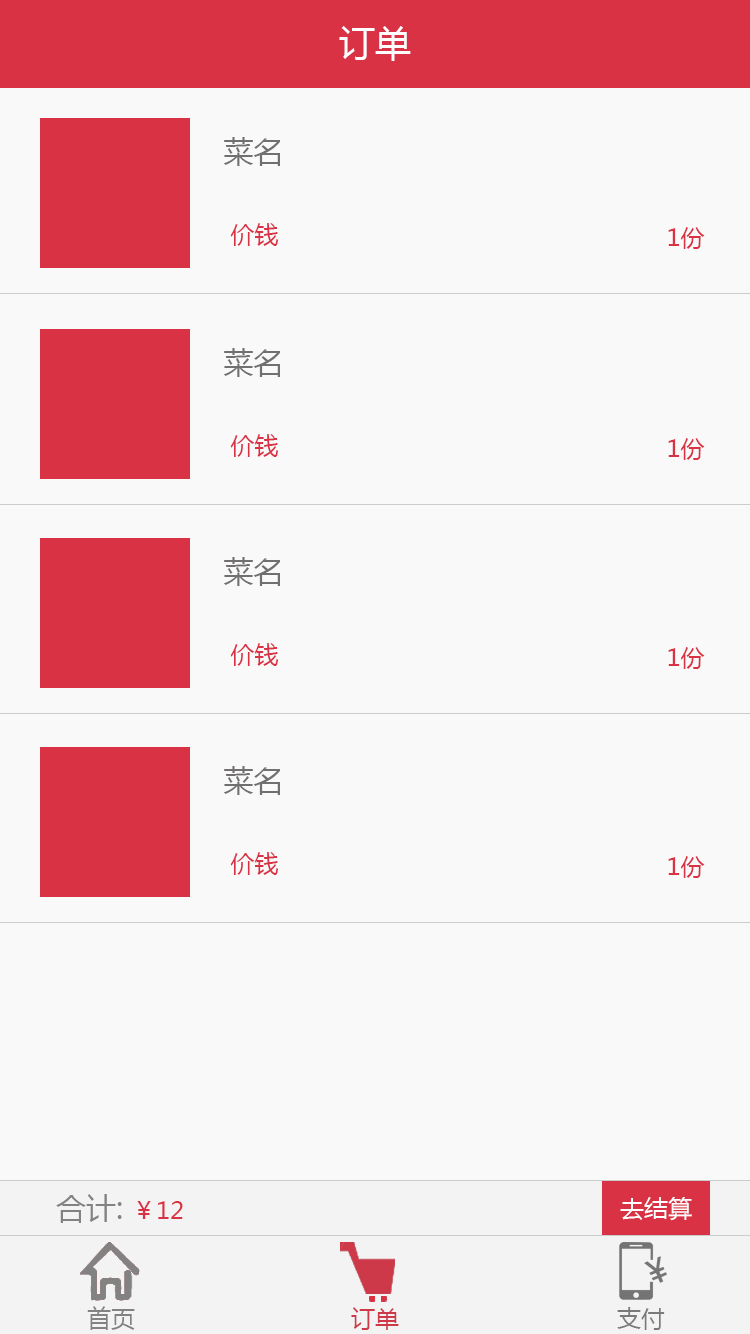
<style>
.page{position:relative;width:750px;height:1334px;background:#f9f9f9}
.page>*{position:absolute;margin:0}
.t1{font:36px "MicrosoftYaHei";color:#ffffff}
.t2{font:30px "MicrosoftYaHei";color:#716f6f}
.t3{font:24px "MicrosoftYaHei";color:#d93244}
.t4{font:30px "MicrosoftYaHei";color:#838282}
.t5{font:24px "MicrosoftYaHei";color:#ffffff}
.t6{font:24px "MicrosoftYaHei";color:#838282}
.t7{font:24px "MicrosoftYaHei";color:#ce3949}
.t8{font:24px "MicrosoftYaHei";color:#7b7a7a}
</style>
<div class="page">
<p class="t1" style="left:339px;top:26px;width:72px;height:35px">订单</p>
<p class="t2" style="left:223px;top:137px;width:57px;height:29px">菜名</p>
<p class="t3" style="left:230px;top:223px;width:49px;height:23px">价钱</p>
<p class="t3" style="left:668px;top:227px;width:37px;height:22px">1份</p>
<p class="t2" style="left:223px;top:348px;width:57px;height:29px">菜名</p>
<p class="t3" style="left:230px;top:434px;width:49px;height:23px">价钱</p>
<p class="t3" style="left:668px;top:438px;width:37px;height:22px">1份</p>
<p class="t2" style="left:223px;top:557px;width:57px;height:29px">菜名</p>
<p class="t3" style="left:230px;top:643px;width:49px;height:23px">价钱</p>
<p class="t3" style="left:668px;top:647px;width:37px;height:22px">1份</p>
<p class="t2" style="left:223px;top:766px;width:57px;height:29px">菜名</p>
<p class="t3" style="left:230px;top:852px;width:49px;height:23px">价钱</p>
<p class="t3" style="left:668px;top:856px;width:37px;height:22px">1份</p>
<p class="t4" style="left:56px;top:1194px;width:127px;height:29px">合计: <span class="t3">￥12</span></p>
<p class="t5" style="left:620px;top:1197px;width:72px;height:24px">去结算</p>
<p class="t6" style="left:87px;top:1306px;width:48px;height:24px">首页</p>
<p class="t7" style="left:351px;top:1307px;width:48px;height:23px">订单</p>
<p class="t8" style="left:617px;top:1307px;width:48px;height:23px">支付</p>
</div>
